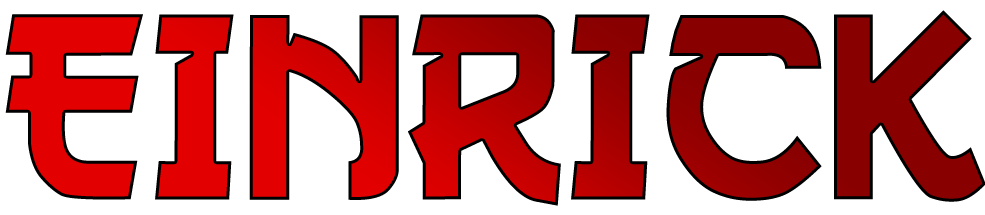
<style>
.page{position:relative;width:985px;height:215px;background:#ffffff}
.page>*{position:absolute;margin:0}
.t1{font:277.5px "GangofThree";color:#000000;text-transform:uppercase}
</style>
<div class="page">
<p class="t1" style="left:5px;top:10px;width:981px;height:196px">einrick</p>
</div>
